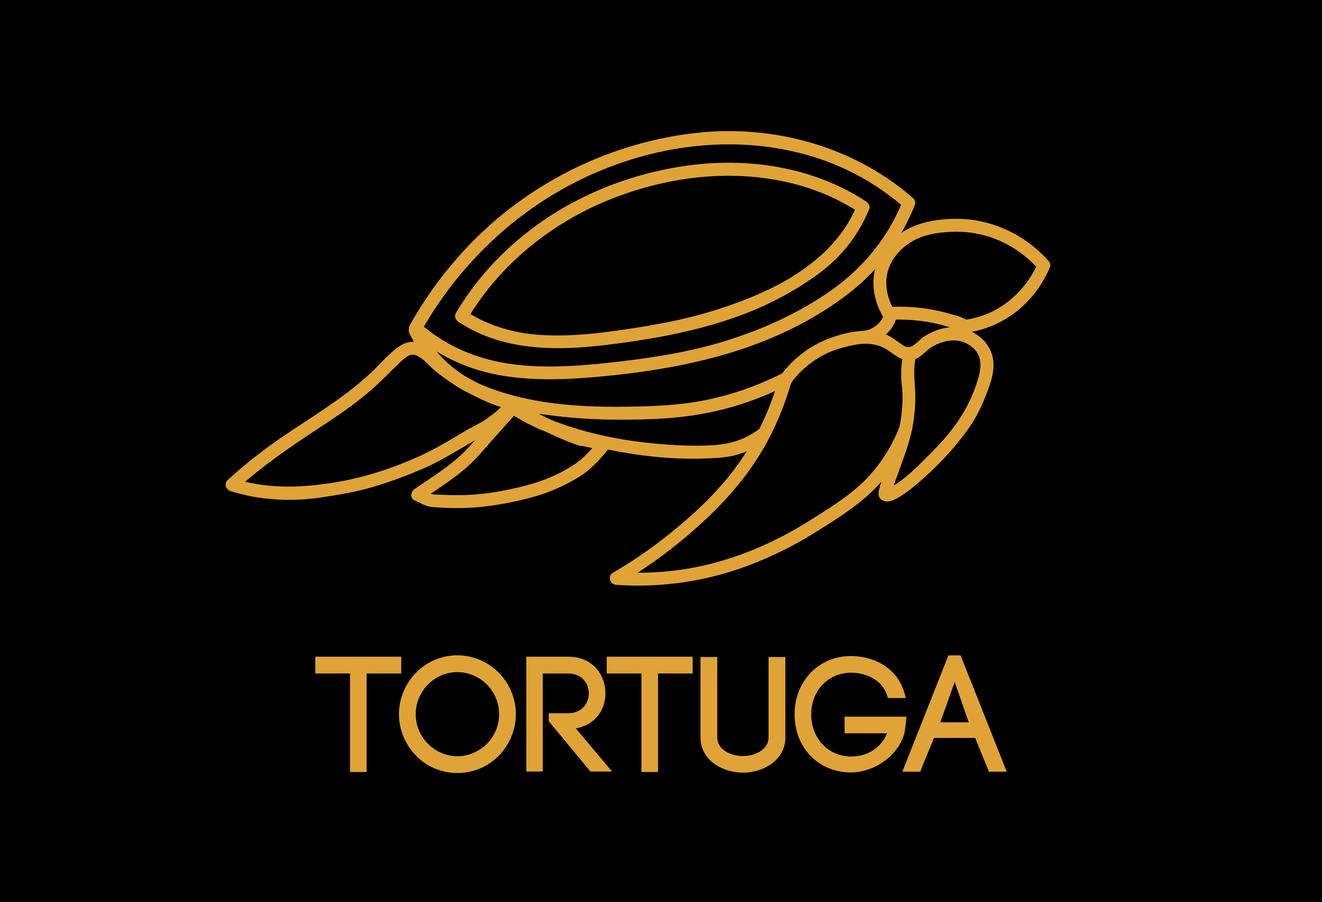
<style>
.page{position:relative;width:1322px;height:902px;background:#000000}
.page>*{position:absolute;margin:0}
.t1{font:163.9px "Code-Bold";color:#e0a338}
</style>
<div class="page">
<p class="t1" style="left:315px;top:655px;width:692px;height:118px">TORTUGA</p>
</div>
